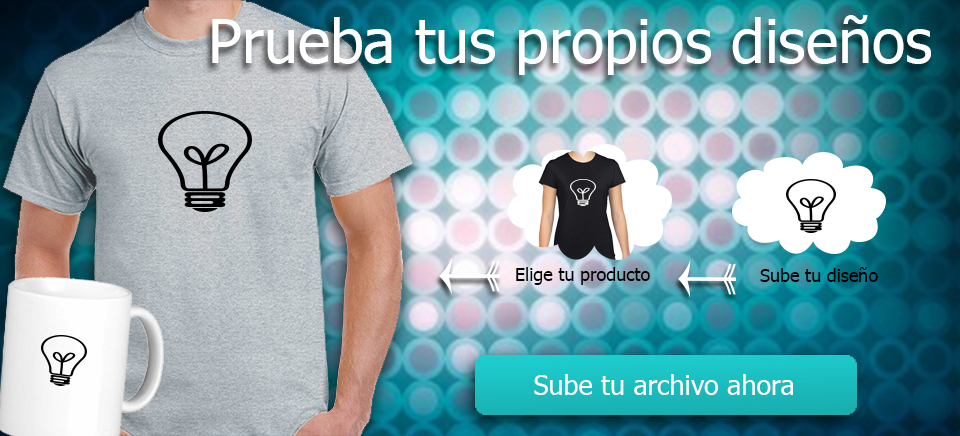
<style>
.page{position:relative;width:960px;height:436px}
.page>*{position:absolute;margin:0}
.t1{font:61px "Tahoma";color:#ffffff}
.t2{font:18px "Tahoma";color:#000000}
.t3{font:27.1px "Tahoma";color:#fffdfd}
</style>
<div class="page">
<p class="t1" style="left:212px;top:15px;width:719px;height:60px">Prueba tus propios diseños</p>
<p class="t2" style="left:516px;top:267px;width:134px;height:18px">Elige tu producto</p>
<p class="t2" style="left:760px;top:267px;width:118px;height:15px">Sube tu diseño</p>
<p class="t3" style="left:534px;top:374px;width:259px;height:21px">Sube tu archivo ahora</p>
</div>
